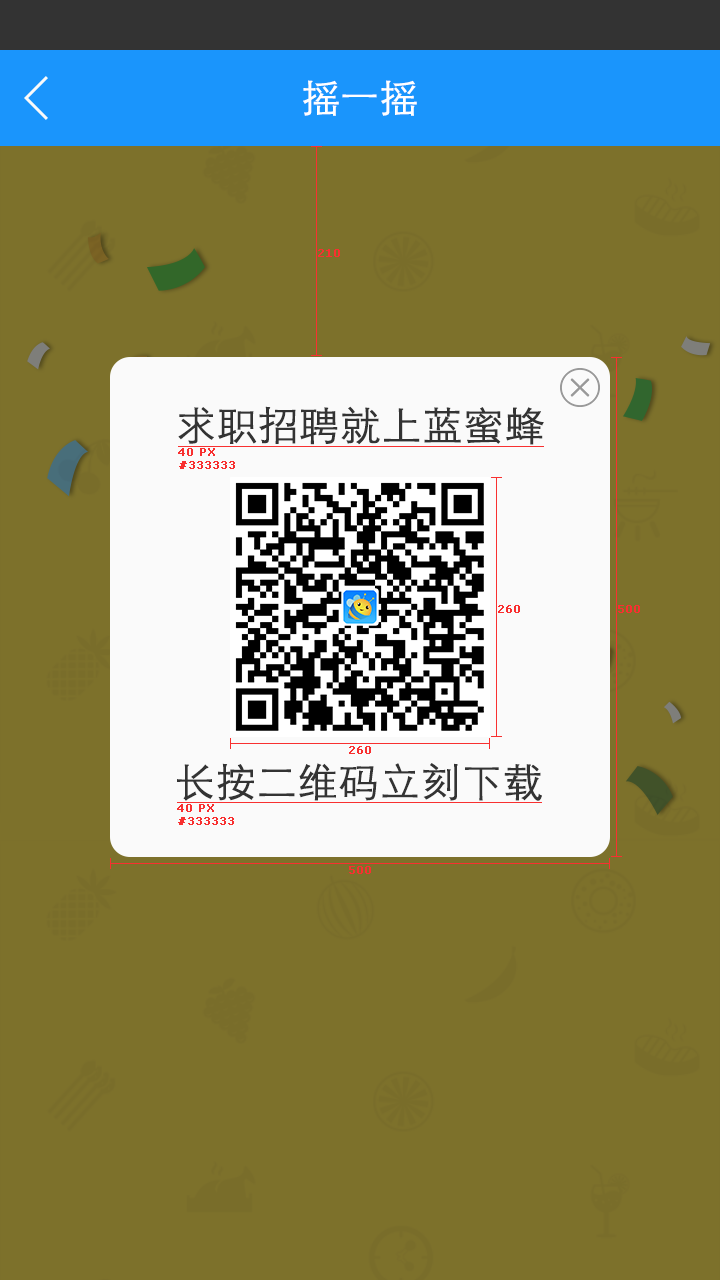
<style>
.page{position:relative;width:720px;height:1280px;background:#7d712b}
.page>*{position:absolute;margin:0}
.t1{font:38px "STXihei";color:#ffffff;font-weight:bold}
.t2{font:11px "Verdana";color:#f83030;font-weight:bold}
.t3{font:40px "STXihei";color:#333333;font-weight:bold}
</style>
<div class="page">
<p class="t1" style="left:303px;top:80px;width:114px;height:36px">摇一摇</p>
<p class="t2" style="left:318px;top:249px;width:22px;height:8px">210</p>
<p class="t3" style="left:178px;top:406px;width:366px;height:39px">求职招聘就上蓝蜜蜂</p>
<p class="t2" style="left:178px;top:448px;width:57px;height:21px">40 PX<br>#333333</p>
<p class="t2" style="left:498px;top:605px;width:22px;height:8px">260</p>
<p class="t2" style="left:618px;top:605px;width:22px;height:8px">500</p>
<p class="t2" style="left:349px;top:746px;width:22px;height:8px">260</p>
<p class="t3" style="left:177px;top:763px;width:365px;height:38px">长按二维码立刻下载</p>
<p class="t2" style="left:177px;top:804px;width:57px;height:21px">40 PX<br>#333333</p>
<p class="t2" style="left:349px;top:866px;width:22px;height:8px">500</p>
</div>
